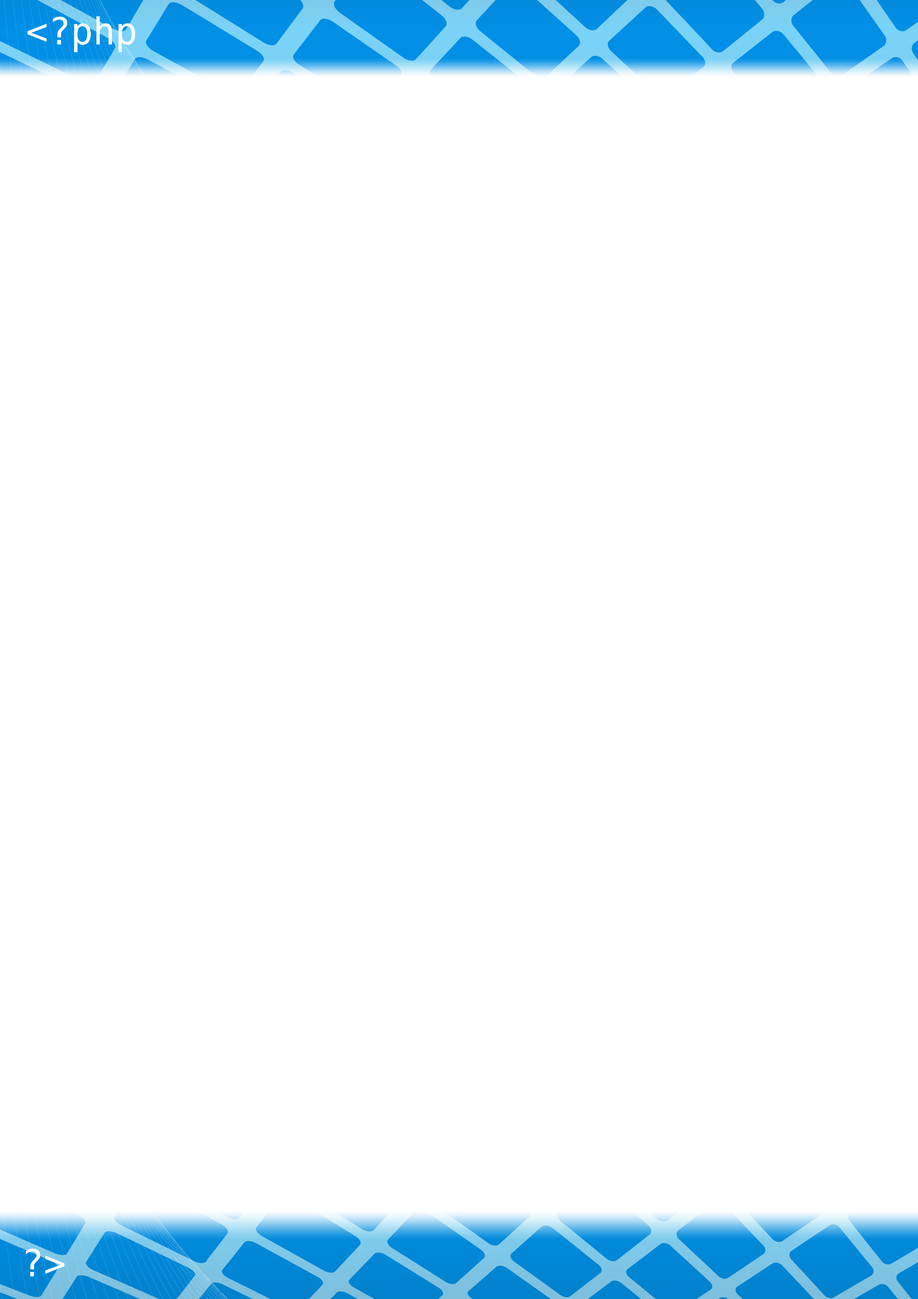
<style>
.page{position:relative;width:918px;height:1299px;background:#ffffff}
.page>*{position:absolute;margin:0}
.t1{font:37px "Menlo-Regular";color:#ffffff}
</style>
<div class="page">
<p class="t1" style="left:27px;top:16px;width:109px;height:36px">&lt;?php</p>
<p class="t1" style="left:26px;top:1248px;width:38px;height:28px">?&gt;</p>
</div>
